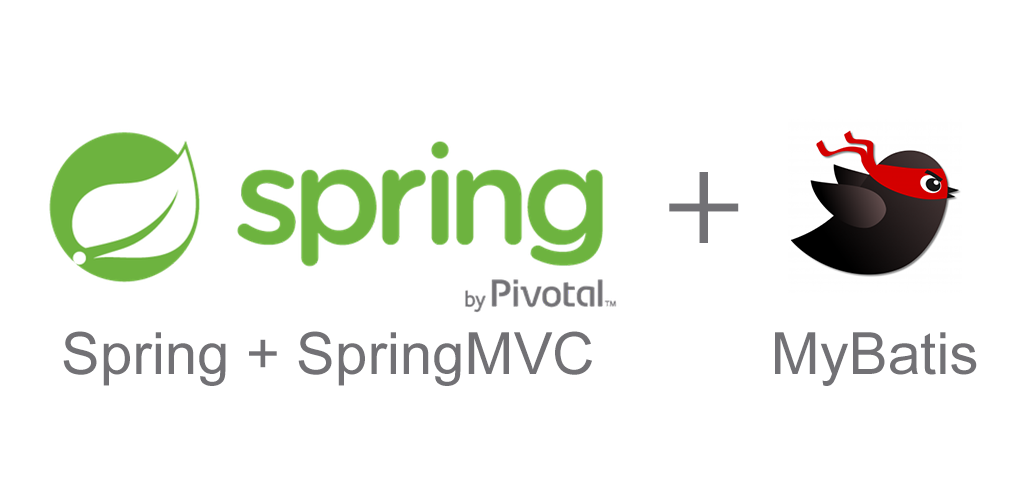
<style>
.page{position:relative;width:1024px;height:500px;background:#ffffff}
.page>*{position:absolute;margin:0}
.t1{font:133.3px "MyriadPro-Regular";color:#727175}
.t2{font:58.3px "ArialMT";color:#727175}
</style>
<div class="page">
<p class="t1" style="left:669px;top:172px;width:70px;height:71px">+</p>
<p class="t2" style="left:63px;top:331px;width:529px;height:55px">Spring + SpringMVC</p>
<p class="t2" style="left:775px;top:332px;width:202px;height:54px">MyBatis</p>
</div>
